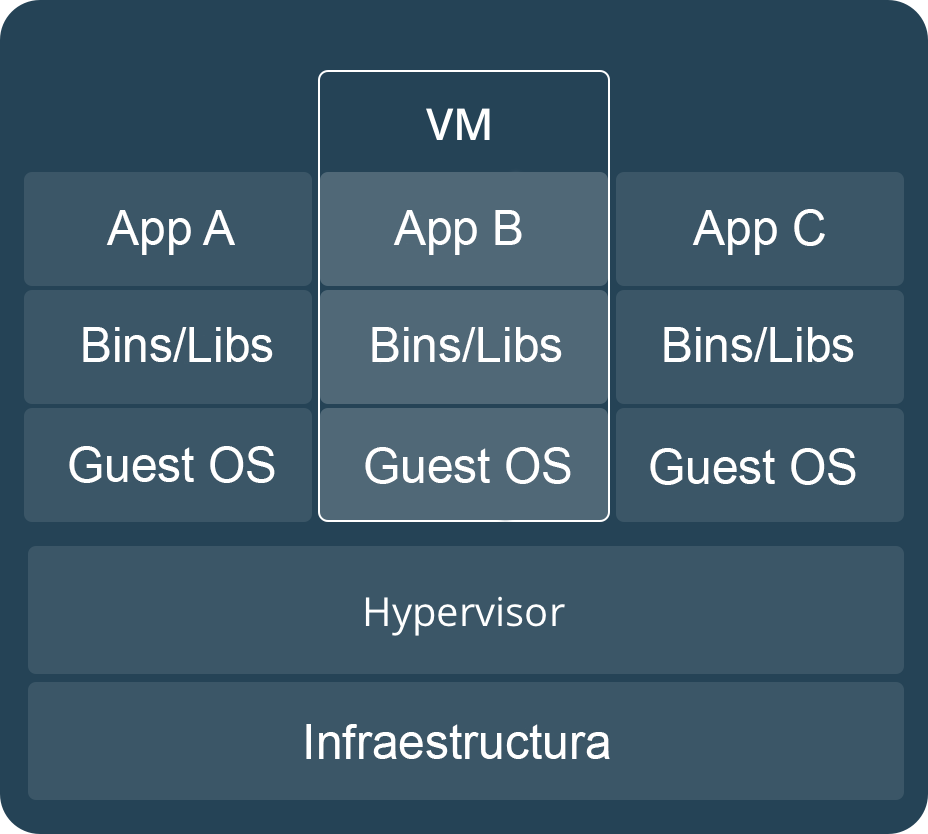
<style>
.page{position:relative;width:928px;height:834px;background:#3b5667}
.page>*{position:absolute;margin:0}
.t1{font:48px "ArialMT";color:#ffffff}
</style>
<div class="page">
<p class="t1" style="left:692px;top:209px;width:133px;height:46px">App C</p>
<p class="t1" style="left:106px;top:210px;width:129px;height:45px">App A</p>
<p class="t1" style="left:393px;top:210px;width:129px;height:45px">App B</p>
<p class="t1" style="left:83px;top:327px;width:190px;height:35px">Bins/Libs</p>
<p class="t1" style="left:372px;top:327px;width:190px;height:35px">Bins/Libs</p>
<p class="t1" style="left:664px;top:327px;width:190px;height:35px">Bins/Libs</p>
<p class="t1" style="left:69px;top:446px;width:206px;height:37px">Guest OS</p>
<p class="t1" style="left:365px;top:447px;width:206px;height:37px">Guest OS</p>
<p class="t1" style="left:650px;top:448px;width:206px;height:37px">Guest OS</p>
<p class="t1" style="left:306px;top:724px;width:304px;height:35px">Infraestructura</p>
</div>
